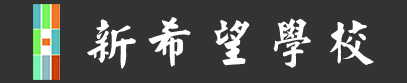
<style>
.page{position:relative;width:407px;height:83px;background:#333333}
.page>*{position:absolute;margin:0}
.t1{font:60px "By-JOSSQ-DMF-in-BeiJing";color:#ffffff}
</style>
<div class="page">
<p class="t1" style="left:87px;top:17px;width:287px;height:52px">新希望学校</p>
</div>
